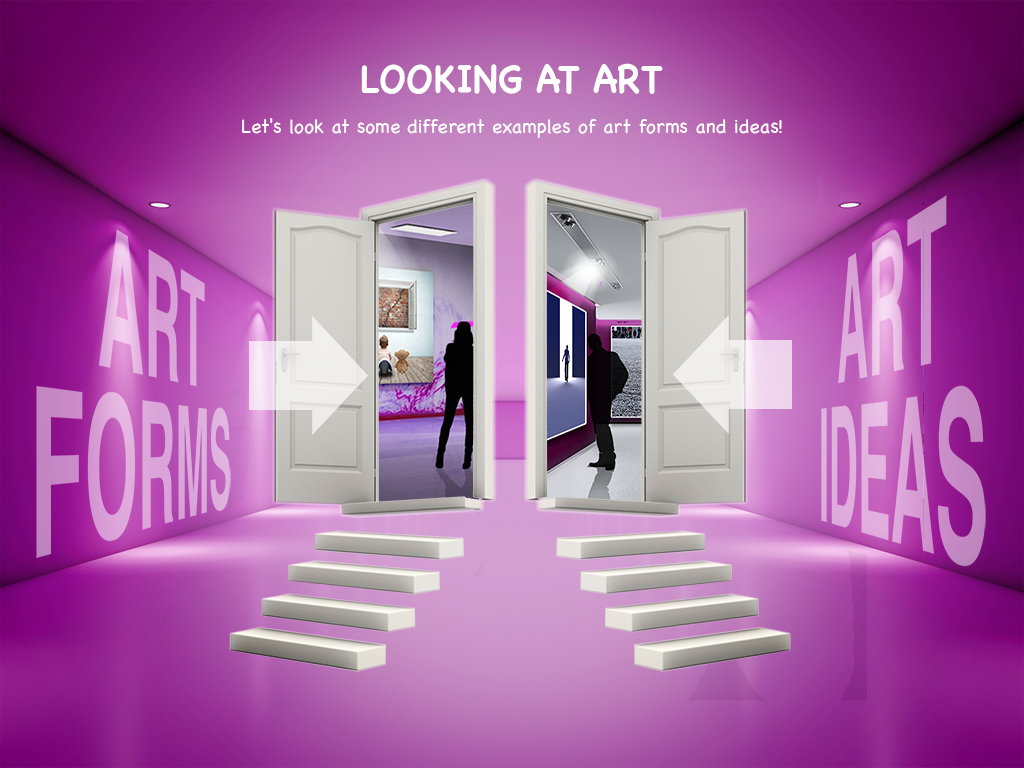
<style>
.page{position:relative;width:1024px;height:768px}
.page>*{position:absolute;margin:0}
.t1{font:38.9px "Chalkboard-Bold";color:#ffffff;text-transform:uppercase;scale:0.94 1}
.t2{font:19.4px "Chalkboard";color:#ffffff}
</style>
<div class="page">
<p class="t1" style="left:361px;top:63px;width:302px;height:31px">Looking at Art</p>
<p class="t2" style="left:242px;top:118px;width:540px;height:20px">Let's look at some different examples of art forms and ideas!</p>
</div>
